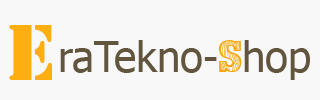
<style>
.page{position:relative;width:320px;height:100px;background:#f8f8f8}
.page>*{position:absolute;margin:0}
.t1{font:83.3px "Stencil";color:#ffae12}
.t2{font:41.7px "Tahoma";color:#61553d}
.t3{font:41.7px "WoodLook";color:#f7a80f}
</style>
<div class="page">
<p class="t1" style="left:9px;top:25px;width:43px;height:55px">E</p>
<p class="t2" style="left:60px;top:40px;width:250px;height:40px">raTekno-<span class="t3">S</span>hop</p>
</div>
